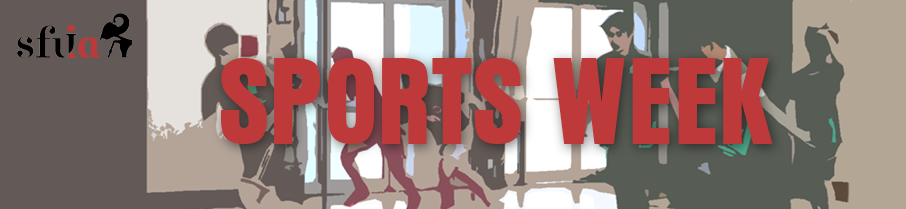
<style>
.page{position:relative;width:906px;height:209px}
.page>*{position:absolute;margin:0}
.t1{font:108px "Aura";color:#be3939}
</style>
<div class="page">
<p class="t1" style="left:220px;top:58px;width:553px;height:86px">SPORTS WEEK</p>
</div>
